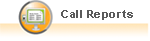
<style>
.page{position:relative;width:150px;height:41px;background:#ffffff}
.page>*{position:absolute;margin:0}
.t1{font:11px "Arial-BoldMT";letter-spacing:0.05em;color:#5a5a5a}
</style>
<div class="page">
<p class="t1" style="left:61px;top:10px;width:72px;height:10px">Call Reports</p>
</div>
